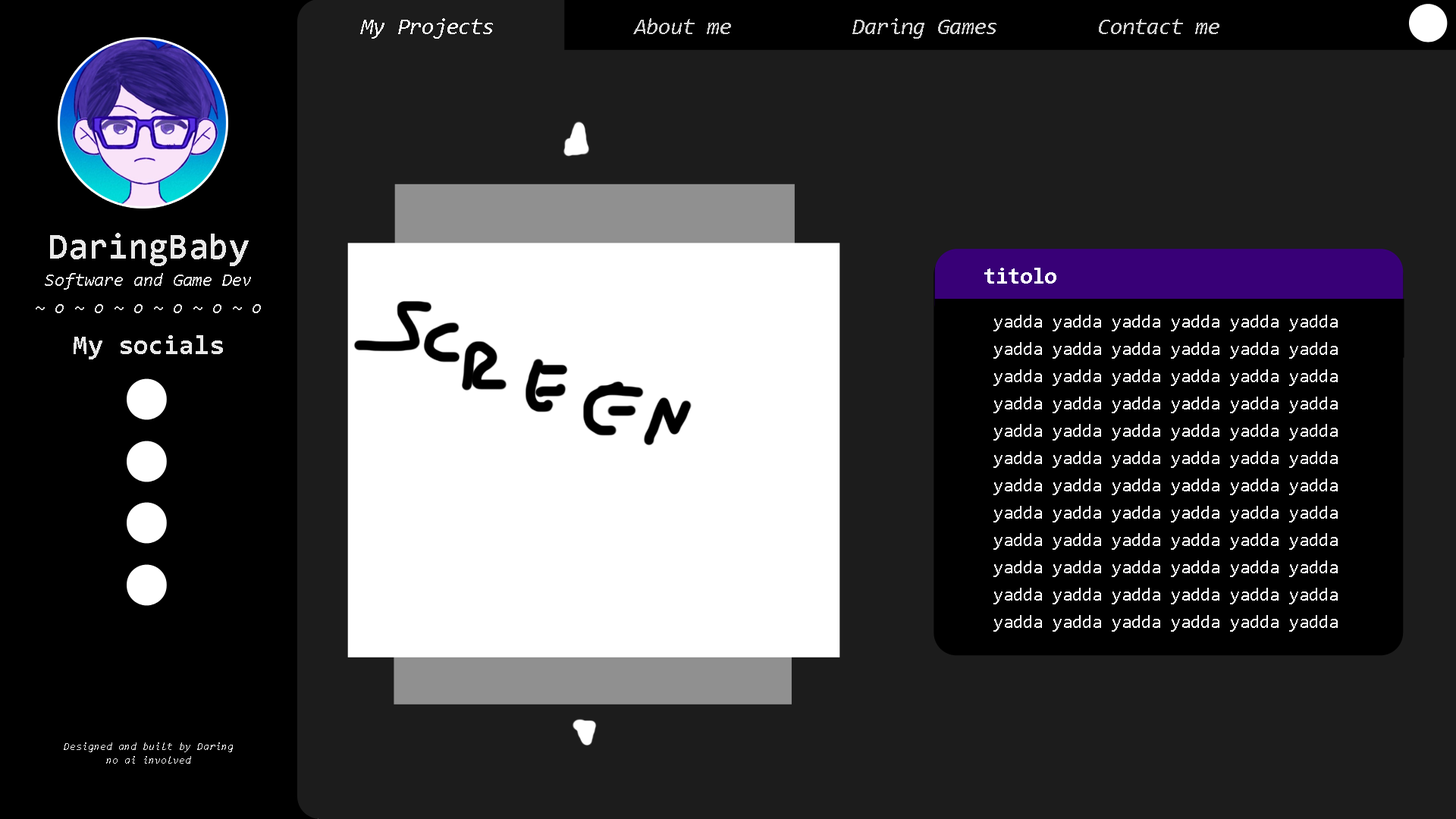
<style>
.page{position:relative;width:1456px;height:819px;background:#1c1c1c}
.page>*{position:absolute;margin:0}
.t1{font:22.7px "Consolas-Italic";color:#d3d3d3}
.t2{font:22.7px "Consolas-Italic";color:#ffffff}
.t3{font:18.2px/13.6px "Consolas-Italic";color:#e8e8e8}
.t4{font:36.4px/13.6px "Consolas-Bold";color:#e8e8e8}
.t5{font:27.3px/13.6px "Consolas-Bold";color:#e8e8e8}
.t6{font:10.6px/13.6px "Consolas-Italic";color:#e8e8e8}
.t7{font:22.7px "Consolas-Bold";color:#ffffff}
.t8{font:18.2px/13.6px "Consolas";color:#ffffff}
</style>
<div class="page">
<p class="t1" style="left:360px;top:18px;width:859px;height:21px"><span class="t2">My Projects      </span>About me     Daring Games    Contact me</p>
<p class="t3" style="left:36px;top:233px;width:225px;height:531px;text-align:center"><span class="t4">DaringBaby<br><br></span>Software and Game Dev<br><br>~ o ~ o ~ o ~ o ~ o ~ o<br> <br><br><span class="t5">My socials<br><br><br><br><br><br><br><br><br><br><br><br><br><br><br><br><br><br><br><br><br><br><br><br><br><br><br><br><br></span><span class="t6">Designed and built by Daring<br>no ai involved</span></p>
<p class="t7" style="left:984px;top:268px;width:72px;height:16px">titolo</p>
<p class="t8" style="left:993px;top:315px;width:345px;height:317px">yadda yadda yadda yadda yadda yadda<br><br>yadda yadda yadda yadda yadda yadda<br><br>yadda yadda yadda yadda yadda yadda<br><br>yadda yadda yadda yadda yadda yadda<br><br>yadda yadda yadda yadda yadda yadda<br><br>yadda yadda yadda yadda yadda yadda<br><br>yadda yadda yadda yadda yadda yadda<br><br>yadda yadda yadda yadda yadda yadda<br><br>yadda yadda yadda yadda yadda yadda<br><br>yadda yadda yadda yadda yadda yadda<br><br>yadda yadda yadda yadda yadda yadda<br><br>yadda yadda yadda yadda yadda yadda</p>
</div>
